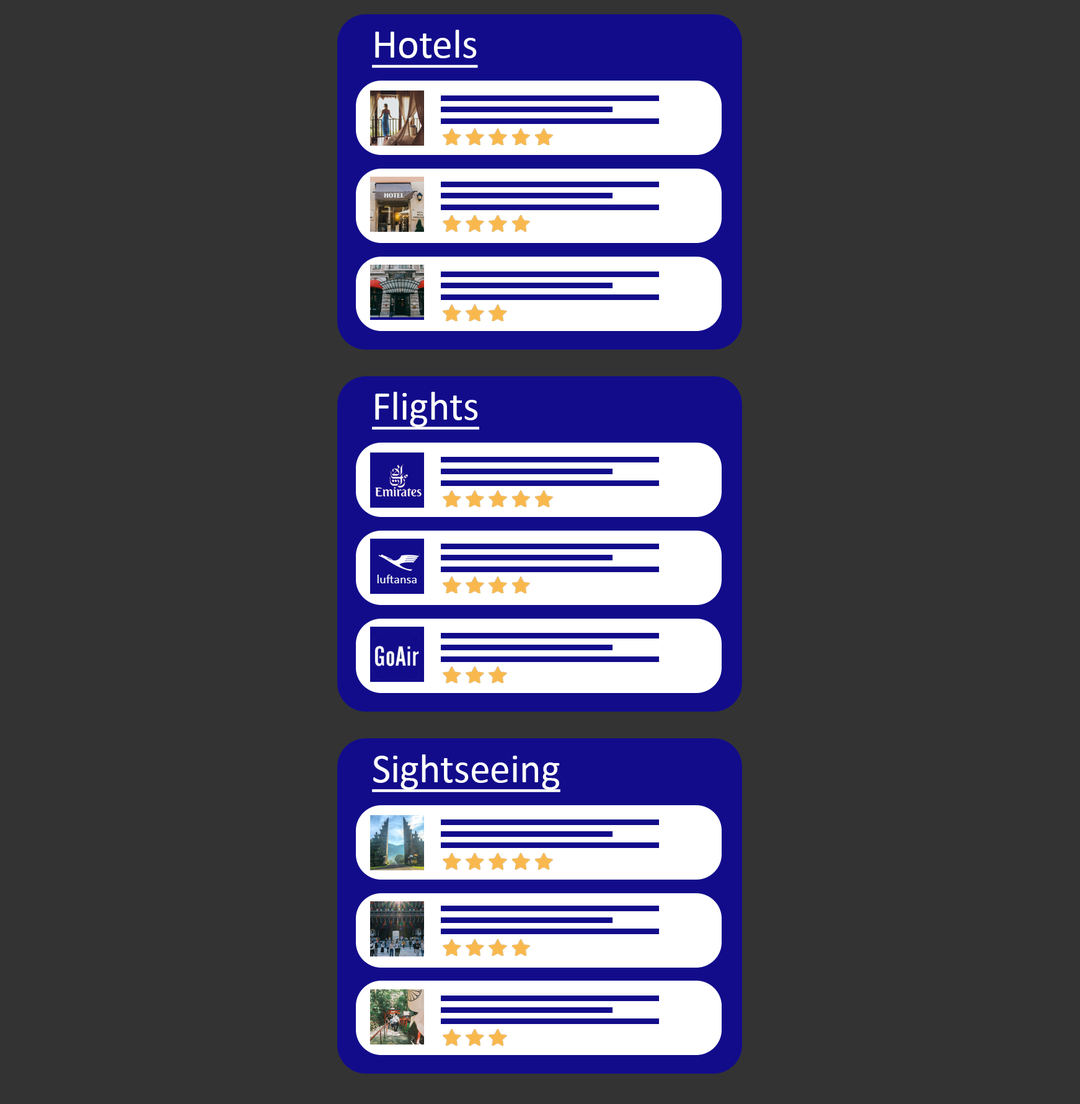
<style>
.page{position:relative;width:1080px;height:1104px;background:#333333}
.page>*{position:absolute;margin:0}
.t1{font:40.7px "Calibri";color:#ffffff;text-decoration:underline}
.t2{font:12.6px "Calibri";color:#ffffff}
</style>
<div class="page">
<p class="t1" style="left:372px;top:30px;width:106px;height:38px">Hotels</p>
<p class="t1" style="left:372px;top:392px;width:107px;height:38px">Flights</p>
<p class="t2" style="left:377px;top:575px;width:40px;height:8px">luftansa</p>
<p class="t1" style="left:372px;top:754px;width:188px;height:38px">Sightseeing</p>
</div>
